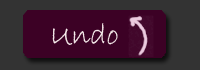
<style>
.page{position:relative;width:200px;height:70px;background:#333333}
.page>*{position:absolute;margin:0}
.t1{font:30px "BradleyHandITC";color:#f9efee}
</style>
<div class="page">
<p class="t1" style="left:52px;top:23px;width:66px;height:22px">Undo</p>
</div>
